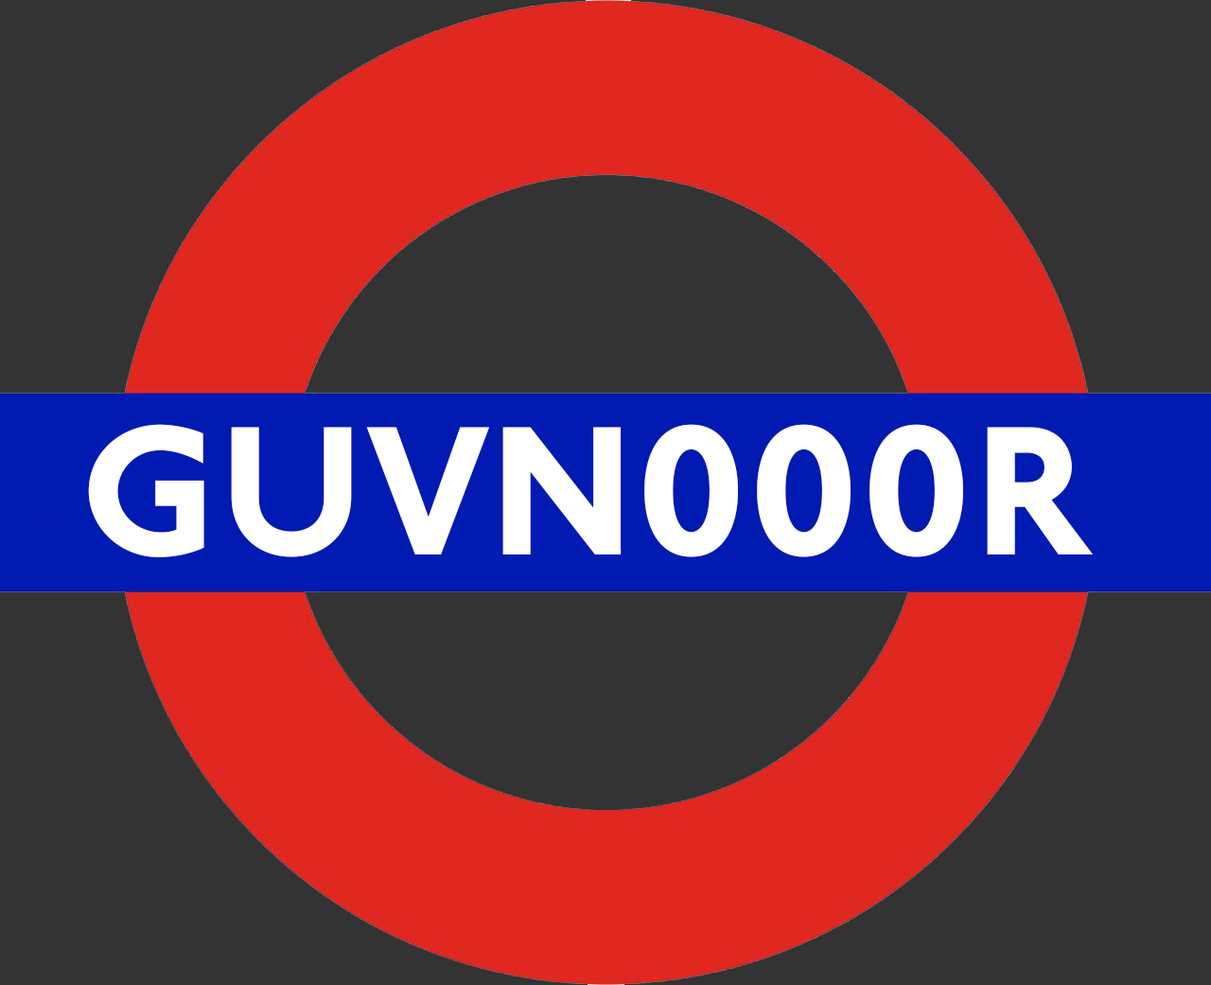
<style>
.page{position:relative;width:1211px;height:985px;background:#333333}
.page>*{position:absolute;margin:0}
.t1{font:189.2px "JohnstonITCStd-Bold";color:#ffffff;text-transform:uppercase}
</style>
<div class="page">
<p class="t1" style="left:88px;top:424px;width:1006px;height:133px">Guvn000r</p>
</div>
